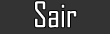
<style>
.page{position:relative;width:110px;height:34px;background:#333333}
.page>*{position:absolute;margin:0}
.t1{font:33.8px "AgencyFB-Reg";color:#ffffff}
</style>
<div class="page">
<p class="t1" style="left:35px;top:1px;width:42px;height:27px">Sair</p>
</div>
